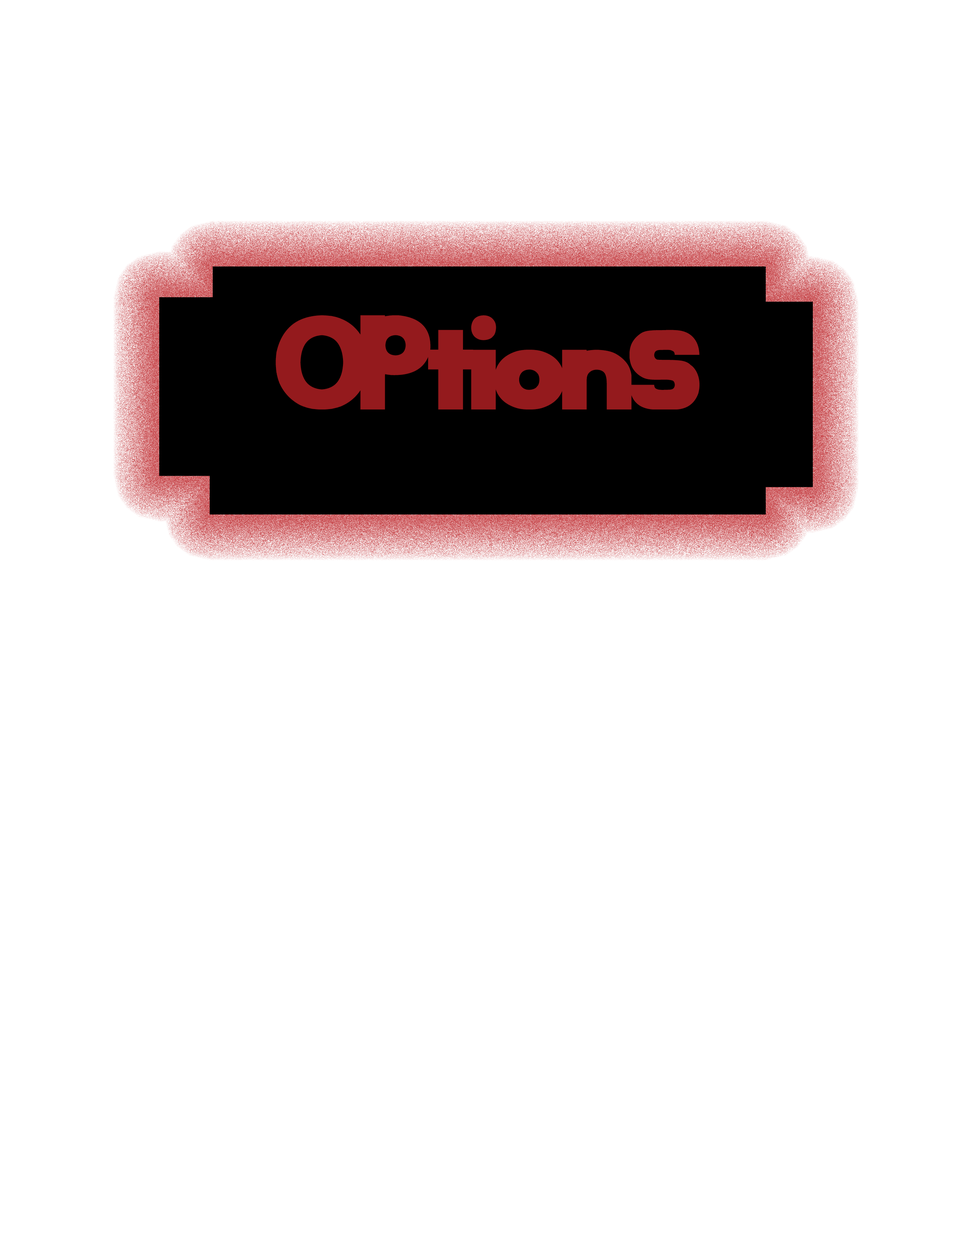
<style>
.page{position:relative;width:960px;height:1242px;background:#ffffff}
.page>*{position:absolute;margin:0}
.t1{font:94.1px "Sematary";color:#941a1d}
</style>
<div class="page">
<p class="t1" style="left:276px;top:315px;width:423px;height:95px">Options</p>
</div>
